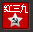
<style>
.page{position:relative;width:33px;height:32px;background:#c50000}
.page>*{position:absolute;margin:0}
.t1{font:10.4px "SimSun";letter-spacing:-0.25em;color:#ffffff}
</style>
<div class="page">
<p class="t1" style="left:4px;top:4px;width:24px;height:9px">红三九</p>
</div>
